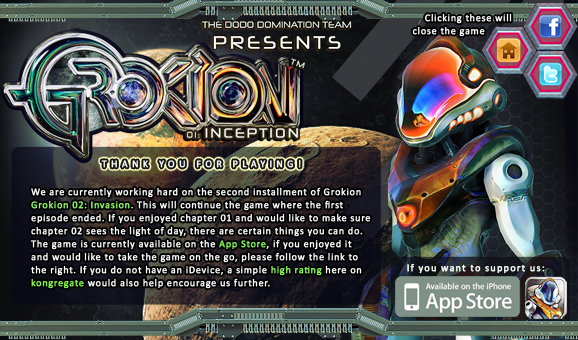
<style>
.page{position:relative;width:578px;height:340px}
.page>*{position:absolute;margin:0}
.t1{font:10.1px/13px "Calibri";letter-spacing:0.05em;color:#ffffff;font-weight:bold}
.t2{font:10.1px "Calibri";letter-spacing:0.4em;color:#ffffff;font-weight:bold}
.t3{font:10.1px/13px "Calibri";letter-spacing:0.05em;color:#95ff66;font-weight:bold}
.t4{font:10.1px/13px "Calibri";letter-spacing:0.05em;color:#86f953;font-weight:bold}
.t5{font:10.1px/13px "Calibri";letter-spacing:0.05em;color:#8bff58;font-weight:bold}
.t6{font:10.1px/13px "Calibri";letter-spacing:0.05em;color:#86ff4a;font-weight:bold}
.t7{font:10.1px "Calibri";letter-spacing:0.1em;color:#ffffff;font-weight:bold}
</style>
<div class="page">
<p class="t1" style="left:412px;top:13px;width:100px;height:24px">Clicking these will <br>close the game</p>
<p class="t2" style="left:101px;top:160px;width:200px;height:8px">THANK YOU FOR PLAYING!</p>
<p class="t1" style="left:30px;top:187px;width:341px;height:102px">We are currently working hard on the second installment of Grokion<br><span class="t3">Grokion 02: Invasion</span>. This will continue the game where the first<br>episode ended. If you enjoyed chapter 01 and would like to make sure<br>chapter 02 sees the light of day, there are certain things you can do.<br>The game is currently available on the <span class="t4">App Store</span>, if you enjoyed it<br>and would like to take the game on the go, please follow the link to<br>the right. If you do not have an iDevice, a simple <span class="t5">high rating</span> here on<br><span class="t6">kongregate</span> would also help encourage us further.</p>
<p class="t7" style="left:407px;top:263px;width:138px;height:11px">If you want to support us:</p>
</div>
